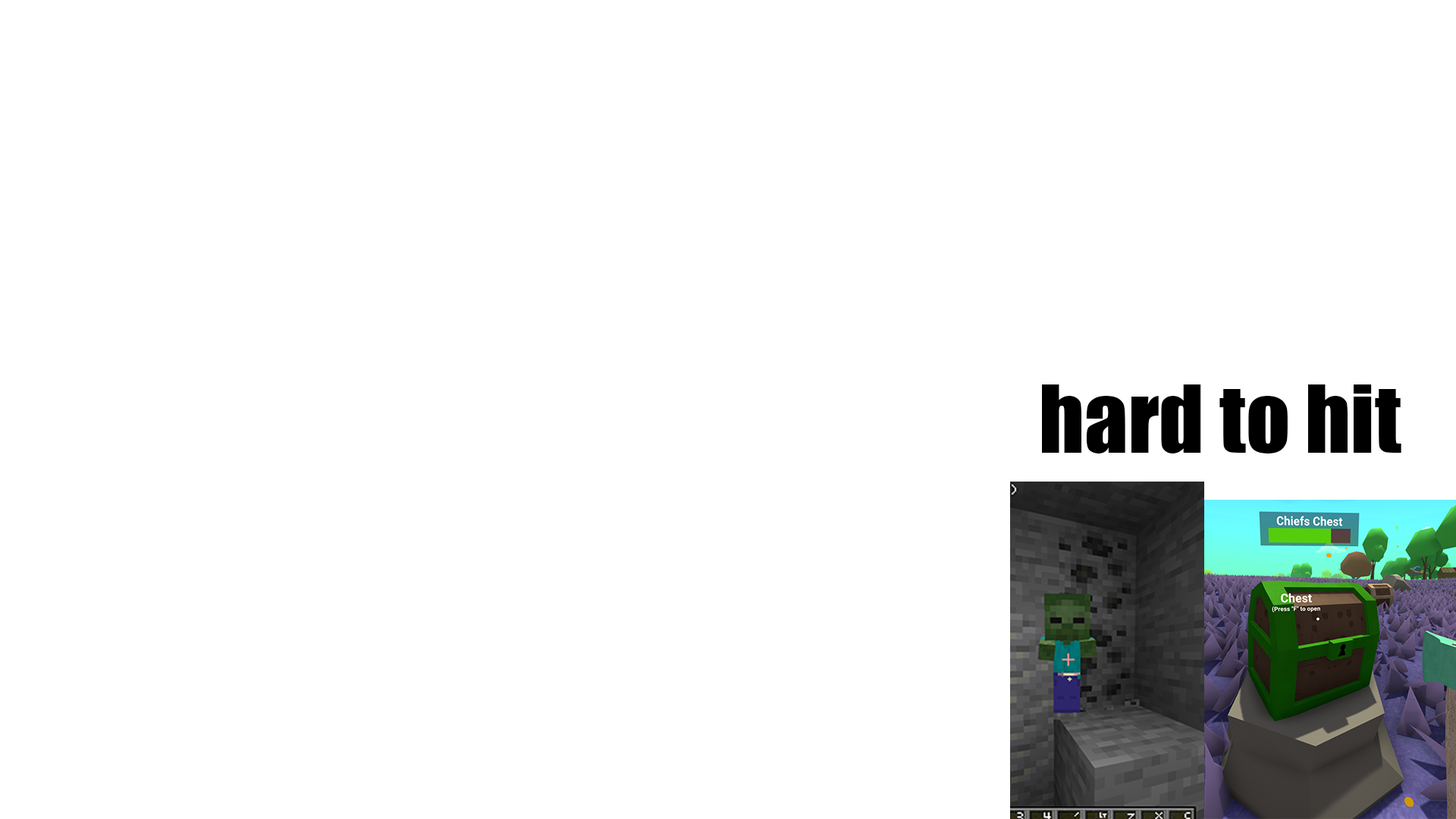
<style>
.page{position:relative;width:1456px;height:819px;background:#ffffff}
.page>*{position:absolute;margin:0}
.t1{font:86.7px "Impact";color:#000000}
</style>
<div class="page">
<p class="t1" style="left:1042px;top:384px;width:359px;height:69px">hard to hit</p>
</div>
